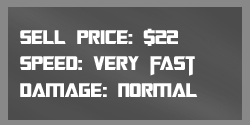
<style>
.page{position:relative;width:250px;height:125px}
.page>*{position:absolute;margin:0}
.t1{font:22px "TransformersMovie";color:#ffffff}
.t2{font:22px "TransformersMovie";letter-spacing:0.02em;color:#ffffff}
.t3{font:22px "TransformersMovie";letter-spacing:-0.1em;color:#ffffff}
</style>
<div class="page">
<p class="t1" style="left:20px;top:28px;width:178px;height:69px">sell p<span class="t2">ri</span>ce: $22<br>spee<span class="t2">d</span>: very <span class="t3">f</span>ast<br>dama<span class="t2">ge</span>: n<span class="t2">o</span>rmal</p>
</div>
